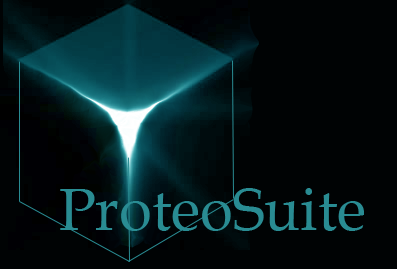
<style>
.page{position:relative;width:397px;height:269px;background:#000304}
.page>*{position:absolute;margin:0}
.t1{font:60px "BookAntiqua";color:#298c93}
</style>
<div class="page">
<p class="t1" style="left:60px;top:188px;width:304px;height:43px">ProteoSuite</p>
</div>
